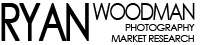
<style>
.page{position:relative;width:200px;height:45px;background:#ffffff}
.page>*{position:absolute;margin:0}
.t1{font:51.2px "CenturyGothic";letter-spacing:-0.1em;color:#000000;font-weight:bold;scale:0.73 1}
.t2{font:24.2px "CenturyGothic";letter-spacing:-0.1em;color:#000000;scale:0.82 1}
.t3{font:17px/11px "CenturyGothic";letter-spacing:-0.05em;color:#000000;text-transform:uppercase}
</style>
<div class="page">
<p class="t1" style="left:1px;top:3px;width:88px;height:38px">RYAN</p>
<p class="t2" style="left:93px;top:3px;width:102px;height:17px">WOODMAN</p>
<p class="t3" style="left:111px;top:24px;width:84px;height:18px;text-align:right">photography<br>market research</p>
</div>
